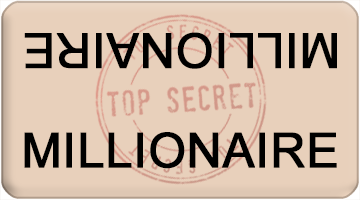
<style>
.page{position:relative;width:360px;height:200px;background:#e8d0bb}
.page>*{position:absolute;margin:0}
.t1{font:48px "ArialMT";color:#000000;font-weight:bold}
</style>
<div class="page">
<p class="t1" style="left:24px;top:32px;width:313px;height:37px;rotate:180deg">MILLIONAIRE</p>
<p class="t1" style="left:24px;top:132px;width:313px;height:37px">MILLIONAIRE</p>
</div>
